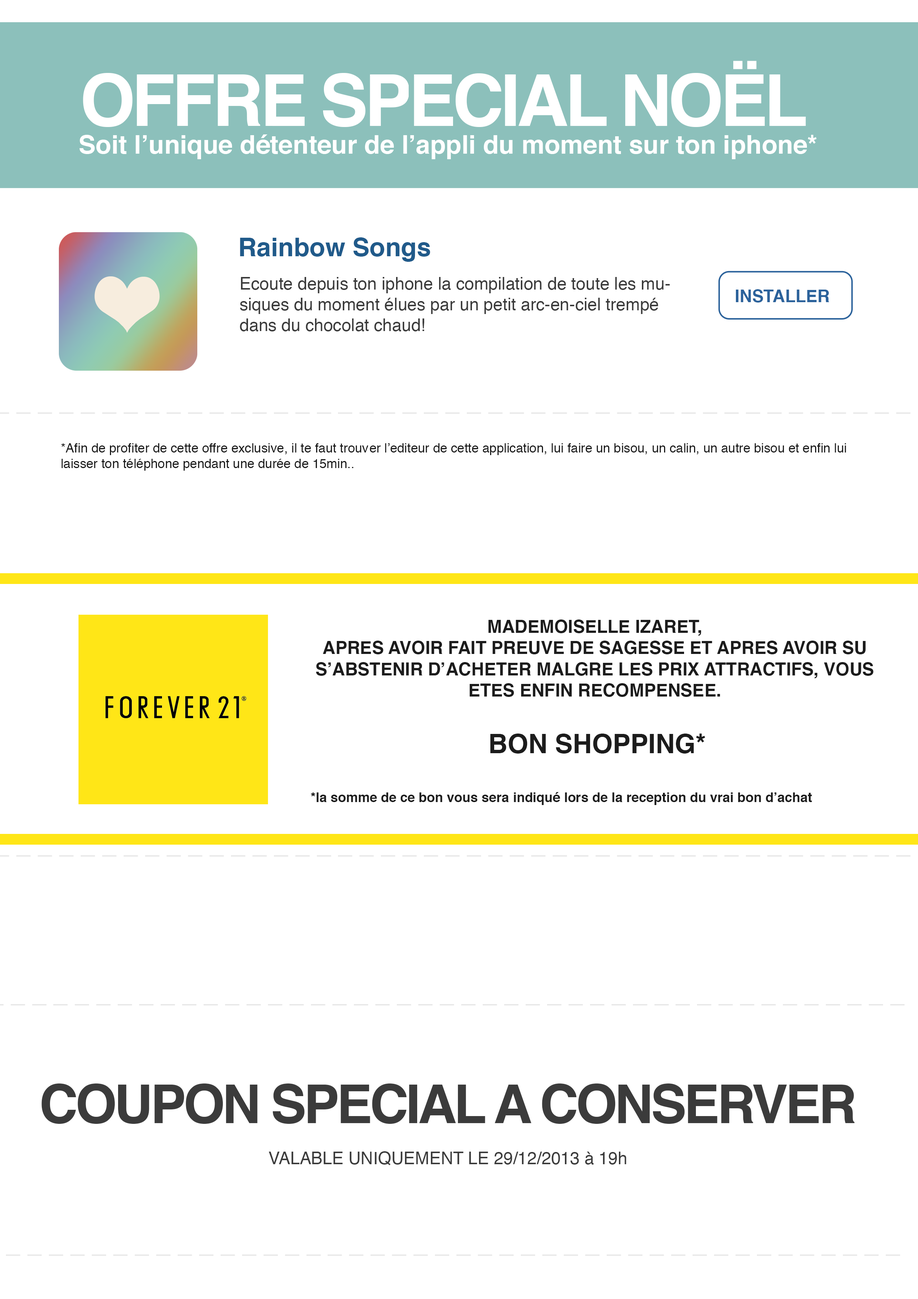
<style>
.page{position:relative;width:918px;height:1299px;background:#ffffff}
.page>*{position:absolute;margin:0}
.t1{font:71.5px "Helvetica-Bold";letter-spacing:-0.05em;color:#ffffff}
.t2{font:25.7px "Helvetica-Bold";color:#ffffff}
.t3{font:25.7px "Helvetica-Bold";color:#205a8a}
.t4{font:17.2px "Helvetica";color:#3b3b3b}
.t5{font:17.2px "Helvetica-Bold";color:#2b629b}
.t6{font:12.9px "Helvetica";color:#181818}
.t7{font:17.8px "Helvetica-Bold";color:#1c1c1c}
.t8{font:26.7px "Helvetica-Bold";color:#1c1c1c}
.t9{font:13.3px "Helvetica-Bold";color:#1c1c1c}
.t10{font:53.6px "Helvetica-Bold";letter-spacing:-0.05em;color:#3b3b3b}
</style>
<div class="page">
<p class="t1" style="left:83px;top:61px;width:723px;height:66px">OFFRE SPECIAL NOËL</p>
<p class="t2" style="left:79px;top:134px;width:738px;height:25px">Soit l’unique détenteur de l’appli du moment sur ton iphone*</p>
<p class="t3" style="left:240px;top:237px;width:190px;height:25px">Rainbow Songs</p>
<p class="t4" style="left:240px;top:277px;width:430px;height:54px">Ecoute depuis ton iphone la compilation de toute les musiques du moment élues par un petit arc-en-ciel trempé dans du chocolat chaud!</p>
<p class="t5" style="left:736px;top:289px;width:93px;height:13px">INSTALLER</p>
<p class="t6" style="left:61px;top:443px;width:785px;height:28px">*Afin de profiter de cette offre exclusive, il te faut trouver l’editeur de cette application, lui faire un bisou, un calin, un autre bisou et enfin lui laisser ton téléphone pendant une durée de 15min..</p>
<p class="t7" style="left:316px;top:619px;width:558px;height:78px;text-align:center">MADEMOISELLE IZARET,<br>APRES AVOIR FAIT PREUVE DE SAGESSE ET APRES AVOIR SU S’ABSTENIR D’ACHETER MALGRE LES PRIX ATTRACTIFS, VOUS ETES ENFIN RECOMPENSEE.</p>
<p class="t8" style="left:490px;top:733px;width:215px;height:20px">BON SHOPPING*</p>
<p class="t9" style="left:311px;top:792px;width:501px;height:13px">*la somme de ce bon vous sera indiqué lors de la reception du vrai bon d’achat</p>
<p class="t4" style="left:41px;top:1083px;width:814px;height:82px;text-align:center"><span class="t10">COUPON SPECIAL A CONSERVER<br></span><br>VALABLE UNIQUEMENT LE 29/12/2013 à 19h</p>
</div>
